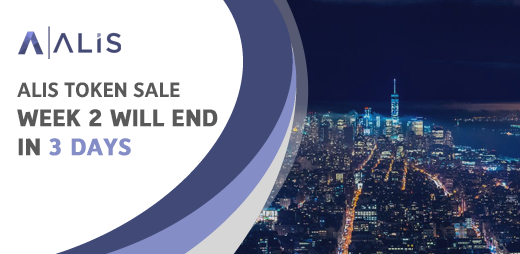
<style>
.page{position:relative;width:520px;height:254px;background:#ffffff}
.page>*{position:absolute;margin:0}
.t1{font:24px/29px "Depot-Bold";color:#595959;text-transform:uppercase;font-weight:bold}
.t2{font:21px/29px "Depot-Bold";color:#595959;text-transform:uppercase}
.t3{font:24px/29px "Depot-Bold";color:#848dc5;text-transform:uppercase;font-weight:bold}
</style>
<div class="page">
<p class="t1" style="left:17px;top:82px;width:201px;height:74px"><span class="t2">ALIS TOKEN SALE<br></span>WEEK 2 WILL END<br>in <span class="t3">3 days</span></p>
</div>
